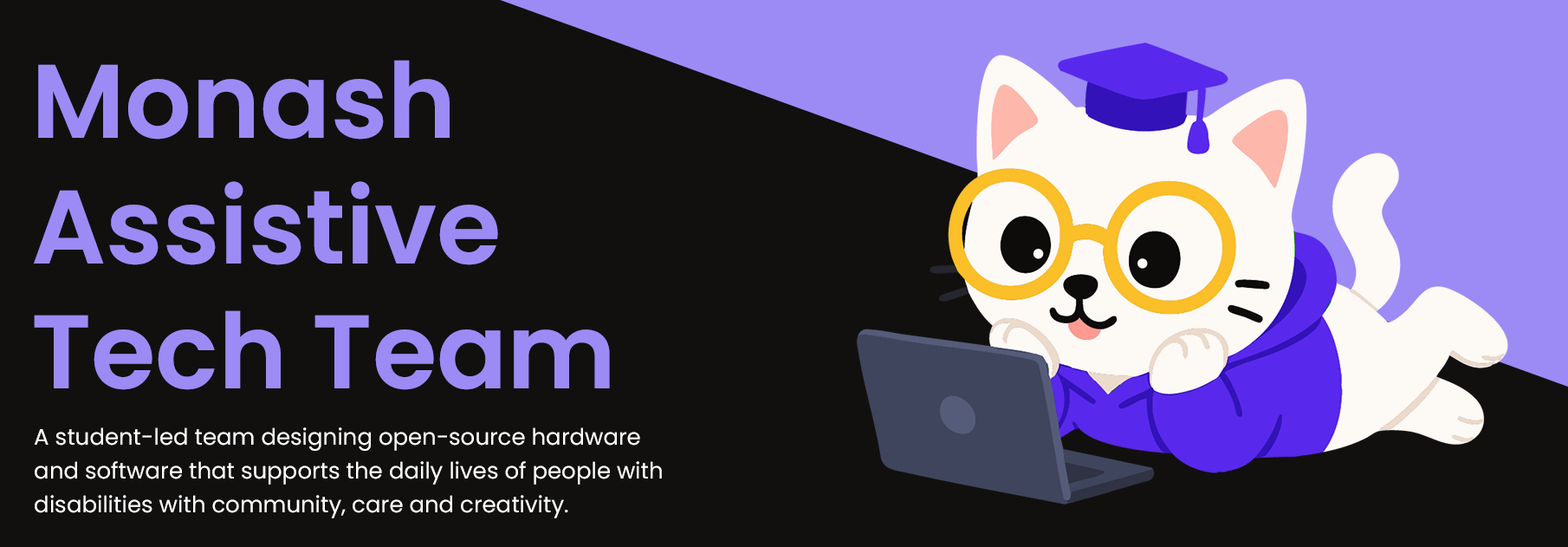
<style>
.page{position:relative;width:1568px;height:547px;background:#11100f}
.page>*{position:absolute;margin:0}
.t1{font:104.3px "Poppins-SemiBold";color:#9c8bf5}
.t2{font:22.5px/33.8px "Poppins-Regular";color:#ffffff}
</style>
<div class="page">
<p class="t1" style="left:34px;top:60px;width:576px;height:330px">Monash <br>Assistive <br>Tech Team</p>
<p class="t2" style="left:35px;top:427px;width:627px;height:91px">A student-led team designing open-source hardware <br>and software that supports the daily lives of people with <br>disabilities with community, care and creativity.</p>
</div>
